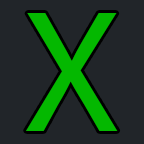
<style>
.page{position:relative;width:144px;height:144px;background:#212529}
.page>*{position:absolute;margin:0}
.t1{font:175px "MyriadPro-Regular";color:#04b800}
</style>
<div class="page">
<p class="t1" style="left:26px;top:13px;width:92px;height:118px">X</p>
</div>
